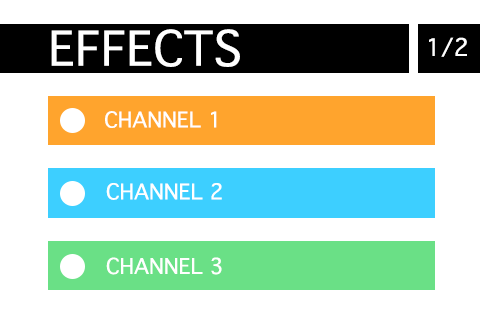
<style>
.page{position:relative;width:480px;height:320px;background:#ffffff}
.page>*{position:absolute;margin:0}
.t1{font:46.4px "Thonburi";color:#ffffff}
.t2{font:23.3px "Thonburi";color:#fefefe}
.t3{font:20.8px "Thonburi";color:#ffffff}
</style>
<div class="page">
<p class="t1" style="left:51px;top:29px;width:189px;height:38px">EFFECTS</p>
<p class="t2" style="left:429px;top:37px;width:38px;height:20px">1/2</p>
<p class="t3" style="left:105px;top:111px;width:112px;height:17px">CHANNEL 1</p>
<p class="t3" style="left:106px;top:183px;width:116px;height:17px">CHANNEL 2</p>
<p class="t3" style="left:106px;top:257px;width:116px;height:18px">CHANNEL 3</p>
</div>
